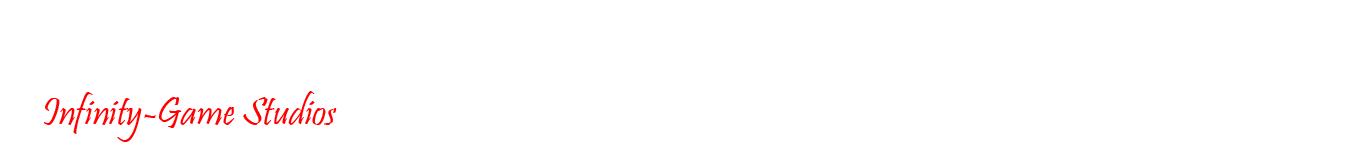
<style>
.page{position:relative;width:1360px;height:150px;background:#ffffff}
.page>*{position:absolute;margin:0}
.t1{font:40px "Pristina-Regular";color:#ff0000}
</style>
<div class="page">
<p class="t1" style="left:44px;top:91px;width:293px;height:51px">Infinity-Game Studios</p>
</div>
